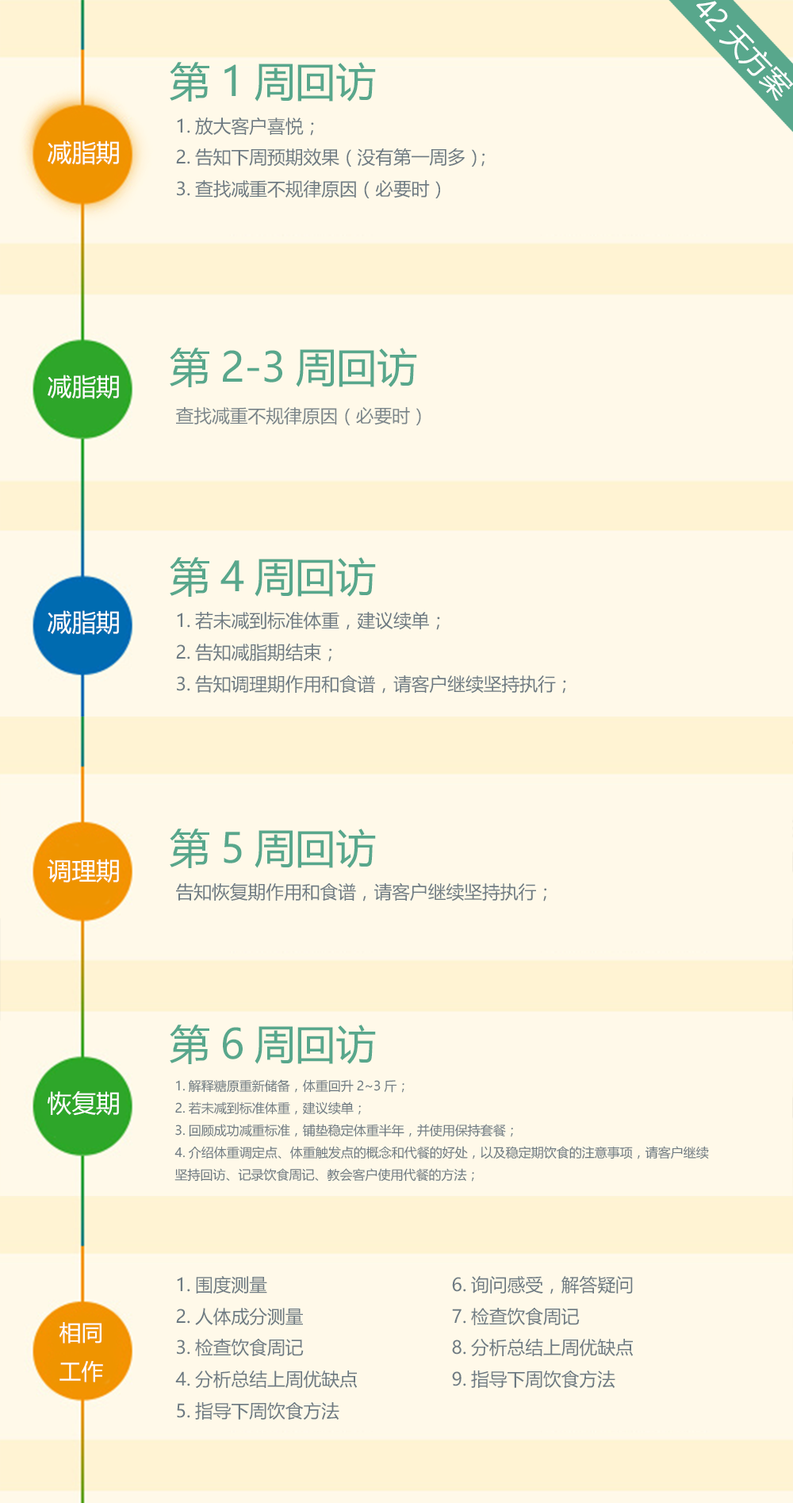
<style>
.page{position:relative;width:793px;height:1503px;background:#fff9e9}
.page>*{position:absolute;margin:0}
.t1{font:28.6px "MicrosoftYaHei";color:#ffffff}
.t2{font:40.6px "MicrosoftYaHei";color:#58a78c}
.t3{font:18px "MicrosoftYaHei";color:#6d7a82}
.t4{font:24.4px "MicrosoftYaHei";color:#ffffff}
.t5{font:18px "MicrosoftYaHei";color:#7a858a}
.t6{font:12.7px "MicrosoftYaHei";color:#6d7a82}
.t7{font:22px "MicrosoftYaHei";color:#ffffff}
</style>
<div class="page">
<p class="t1" style="left:697px;top:1px;width:97px;height:100px;rotate:46deg">42天方案</p>
<p class="t2" style="left:170px;top:62px;width:206px;height:40px">第1周回访</p>
<p class="t3" style="left:176px;top:117px;width:309px;height:81px">1.放大客户喜悦；<br>2.告知下周预期效果（没有第一周多）；<br>3.查找减重不规律原因（必要时）</p>
<p class="t4" style="left:48px;top:140px;width:71px;height:25px">减脂期</p>
<p class="t2" style="left:170px;top:348px;width:247px;height:39px">第2-3周回访</p>
<p class="t4" style="left:48px;top:375px;width:71px;height:24px">减脂期</p>
<p class="t5" style="left:175px;top:407px;width:246px;height:18px">查找减重不规律原因（必要时）</p>
<p class="t2" style="left:170px;top:557px;width:206px;height:40px">第4周回访</p>
<p class="t4" style="left:48px;top:610px;width:71px;height:25px">减脂期</p>
<p class="t3" style="left:176px;top:612px;width:391px;height:81px">1.若未减到标准体重，建议续单；<br>2.告知减脂期结束；<br>3.告知调理期作用和食谱，请客户继续坚持执行；</p>
<p class="t2" style="left:170px;top:828px;width:206px;height:40px">第5周回访</p>
<p class="t4" style="left:48px;top:859px;width:71px;height:24px">调理期</p>
<p class="t3" style="left:176px;top:882px;width:371px;height:19px">告知恢复期作用和食谱，请客户继续坚持执行；</p>
<p class="t2" style="left:170px;top:1024px;width:206px;height:40px">第6周回访</p>
<p class="t6" style="left:175px;top:1079px;width:534px;height:102px">1.解释糖原重新储备，体重回升2~3斤；<br>2.若未减到标准体重，建议续单；<br>3.回顾成功减重标准，铺垫稳定体重半年，并使用保持套餐；<br>4.介绍体重调定点、体重触发点的概念和代餐的好处，以及稳定期饮食的注意事项，请客户继续<br>坚持回访、记录饮食周记、教会客户使用代餐的方法；</p>
<p class="t4" style="left:48px;top:1091px;width:71px;height:25px">恢复期</p>
<p class="t3" style="left:175px;top:1275px;width:182px;height:145px">1.围度测量<br>2.人体成分测量<br>3.检查饮食周记<br>4.分析总结上周优缺点<br>5.指导下周饮食方法</p>
<p class="t3" style="left:452px;top:1276px;width:181px;height:112px">6.询问感受，解答疑问<br>7.检查饮食周记<br>8.分析总结上周优缺点<br>9.指导下周饮食方法</p>
<p class="t7" style="left:60px;top:1322px;width:43px;height:60px">相同<br>工作</p>
</div>
